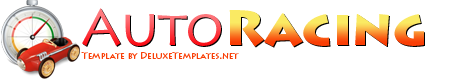
<style>
.page{position:relative;width:450px;height:79px;background:#ffffff}
.page>*{position:absolute;margin:0}
.t1{font:50.4px "LithosPro-Regular"}
.t2{font:50.4px "LithosPro-Black"}
.t3{font:8.7px "LithosPro-Regular";color:#f93e05}
</style>
<div class="page">
<p class="t1" style="left:82px;top:8px;width:139px;height:38px">Auto</p>
<p class="t2" style="left:229px;top:10px;width:195px;height:37px">Racing</p>
<p class="t3" style="left:81px;top:52px;width:158px;height:7px">Template by DeluxeTemplates.net</p>
</div>
